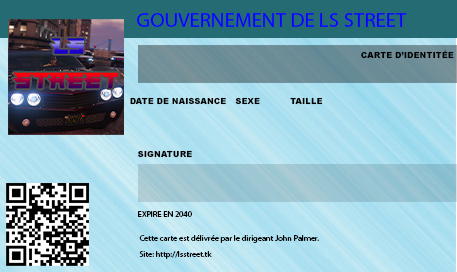
<style>
.page{position:relative;width:457px;height:272px}
.page>*{position:absolute;margin:0}
.t1{font:20.8px "MyriadPro-Regular";color:#0c00ff}
.t2{font:8.3px "Arial-Black";color:#010101}
.t3{font:8.3px "MyriadPro-Regular";color:#000000}
</style>
<div class="page">
<p class="t1" style="left:137px;top:13px;width:270px;height:14px">GOUVERNEMENT DE LS STREET</p>
<p class="t2" style="left:361px;top:50px;width:93px;height:9px">CARTE D’IDENTITÉE</p>
<p class="t2" style="left:130px;top:97px;width:96px;height:8px">DATE DE NAISSANCE</p>
<p class="t2" style="left:235px;top:97px;width:25px;height:8px">SEXE</p>
<p class="t2" style="left:290px;top:97px;width:33px;height:8px">TAILLE</p>
<p class="t2" style="left:138px;top:150px;width:54px;height:8px">SIGNATURE</p>
<p class="t3" style="left:138px;top:211px;width:54px;height:6px">EXPIRE EN 2040</p>
<p class="t3" style="left:139px;top:235px;width:180px;height:8px">Cette carte est délivrée par le dirigeant John Palmer.</p>
<p class="t3" style="left:139px;top:251px;width:73px;height:8px">Site: http://lsstreet.tk</p>
</div>
